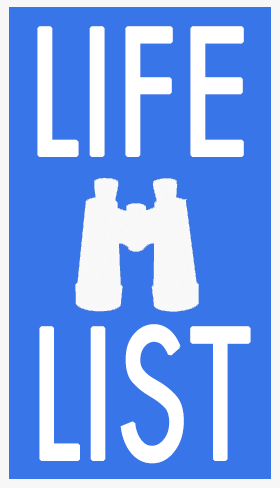
<style>
.page{position:relative;width:280px;height:488px;background:#3775e8}
.page>*{position:absolute;margin:0}
.t1{font:168px "Futura-Book";letter-spacing:0.01em;color:#ffffff;font-weight:bold;scale:0.75 1}
.t2{font:173.5px "Futura-Book";letter-spacing:0.01em;color:#ffffff;font-weight:bold;scale:0.72 1}
</style>
<div class="page">
<p class="t1" style="left:37px;top:26px;width:207px;height:131px">LIFE</p>
<p class="t2" style="left:39px;top:324px;width:212px;height:140px">LIST</p>
</div>
